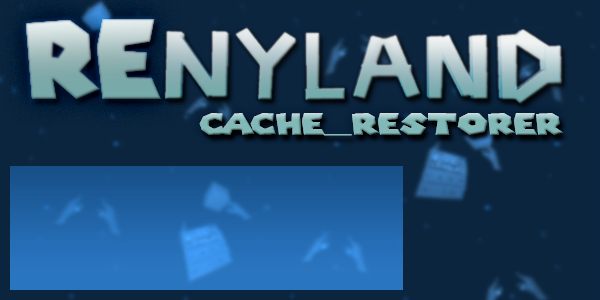
<style>
.page{position:relative;width:600px;height:300px;background:#0b253f}
.page>*{position:absolute;margin:0}
.t1{font:107.1px "SuperMarioGalaxy"}
.t2{font:30px "SuperMarioGalaxy";scale:1.28 1}
</style>
<div class="page">
<p class="t1" style="left:26px;top:19px;width:135px;height:80px">RE</p>
<p class="t1" style="left:26px;top:19px;width:135px;height:80px">RE</p>
<p class="t2" style="left:199px;top:113px;width:364px;height:23px">CACHE_RESTORER</p>
</div>
